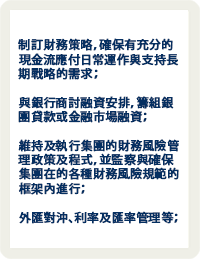
<style>
.page{position:relative;width:200px;height:259px;background:#ffffff}
.page>*{position:absolute;margin:0}
.t1{font:12px "KozGoPr6N-Medium";letter-spacing:0.005em;color:#052f61;font-weight:bold}
</style>
<div class="page">
<p class="t1" style="left:18px;top:38px;width:161px;height:186px">制訂財務策略，確保有充分的現金流應付日常運作與支持長期戰略的需求；<br><br>與銀行商討融資安排，籌組銀團貸款或金融市場融資；<br><br>維持及執行集團的財務風險管理政策及程式，並監察與確保集團在的各種財務風險規範的框架內進行；<br><br>外匯對沖、利率及匯率管理等；</p>
</div>
